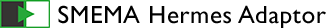
<style>
.page{position:relative;width:333px;height:28px;background:#ffffff}
.page>*{position:absolute;margin:0}
.t1{font:25px "GillSansMT";letter-spacing:0.025em;color:#010101}
</style>
<div class="page">
<p class="t1" style="left:58px;top:5px;width:268px;height:23px">SMEMA Hermes Adaptor</p>
</div>
